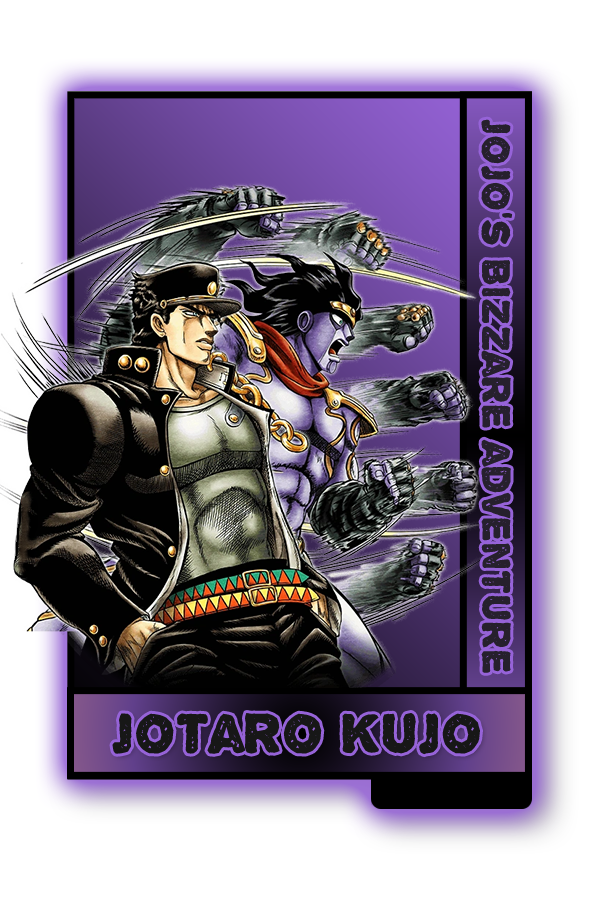
<style>
.page{position:relative;width:600px;height:900px;background:#ffffff}
.page>*{position:absolute;margin:0}
.t1{font:43px "AlphaEcho";color:#26202d}
.t2{font:60px "AlphaEcho";color:#171717}
</style>
<div class="page">
<p class="t1" style="left:481px;top:119px;width:32px;height:554px;rotate:90deg">Jojo's Bizzare adventure</p>
<p class="t2" style="left:112px;top:712px;width:369px;height:43px">Jotaro Kujo</p>
</div>
